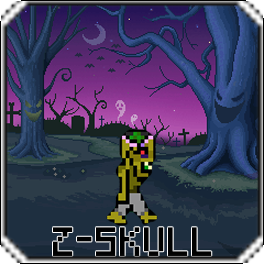
<style>
.page{position:relative;width:264px;height:264px}
.page>*{position:absolute;margin:0}
.t1{font:24px "Pixeled";color:#000000}
</style>
<div class="page">
<p class="t1" style="left:53px;top:227px;width:159px;height:29px">Z-SKULL</p>
</div>
